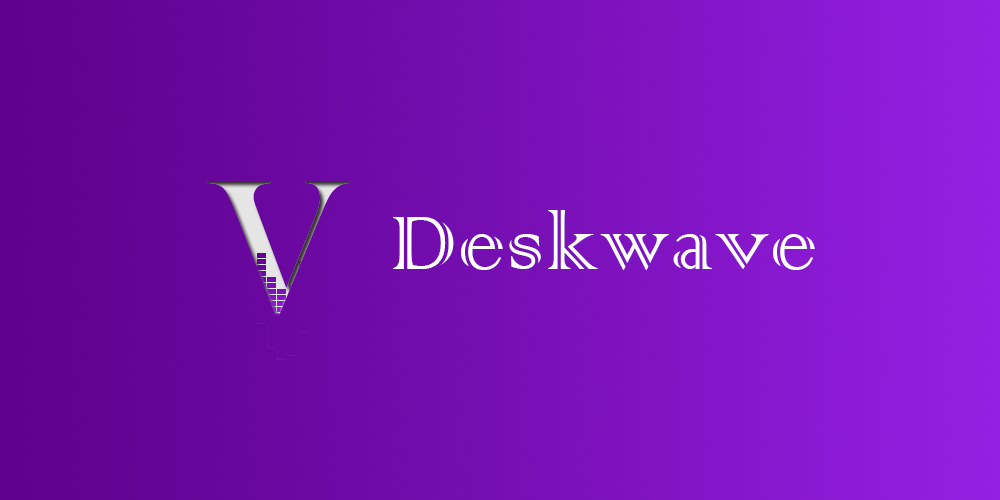
<style>
.page{position:relative;width:1000px;height:500px}
.page>*{position:absolute;margin:0}
.t1{font:100px "ColonnaMT";letter-spacing:0.02em;color:#ffffff}
</style>
<div class="page">
<p class="t1" style="left:393px;top:210px;width:422px;height:60px">Deskwave</p>
</div>
